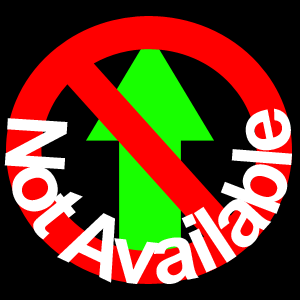
<style>
.page{position:relative;width:300px;height:300px;background:#000000}
.page>*{position:absolute;margin:0}
.t1{font:83.3px "Arial-BoldMT";color:#ffffff}
</style>
<div class="page">
<p class="t1" style="left:4px;top:108px;width:288px;height:176px;text-align:center">Not Available</p>
</div>
